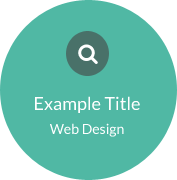
<style>
.page{position:relative;width:177px;height:180px;background:#50b8a4}
.page>*{position:absolute;margin:0}
.t1{font:18px "Lato-Regular";color:#ffffff}
.t2{font:14px "Lato-Regular";color:#ffffff}
</style>
<div class="page">
<p class="t1" style="left:35px;top:96px;width:105px;height:17px">Example Title</p>
<p class="t2" style="left:50px;top:123px;width:74px;height:14px">Web Design</p>
</div>
